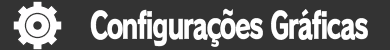
<style>
.page{position:relative;width:390px;height:50px;background:#333333}
.page>*{position:absolute;margin:0}
.t1{font:36px "RodinPro-EB";letter-spacing:-0.067em;color:#ffffff;scale:0.71 1}
</style>
<div class="page">
<p class="t1" style="left:90px;top:8px;width:278px;height:39px">Configurações Gráficas</p>
</div>
